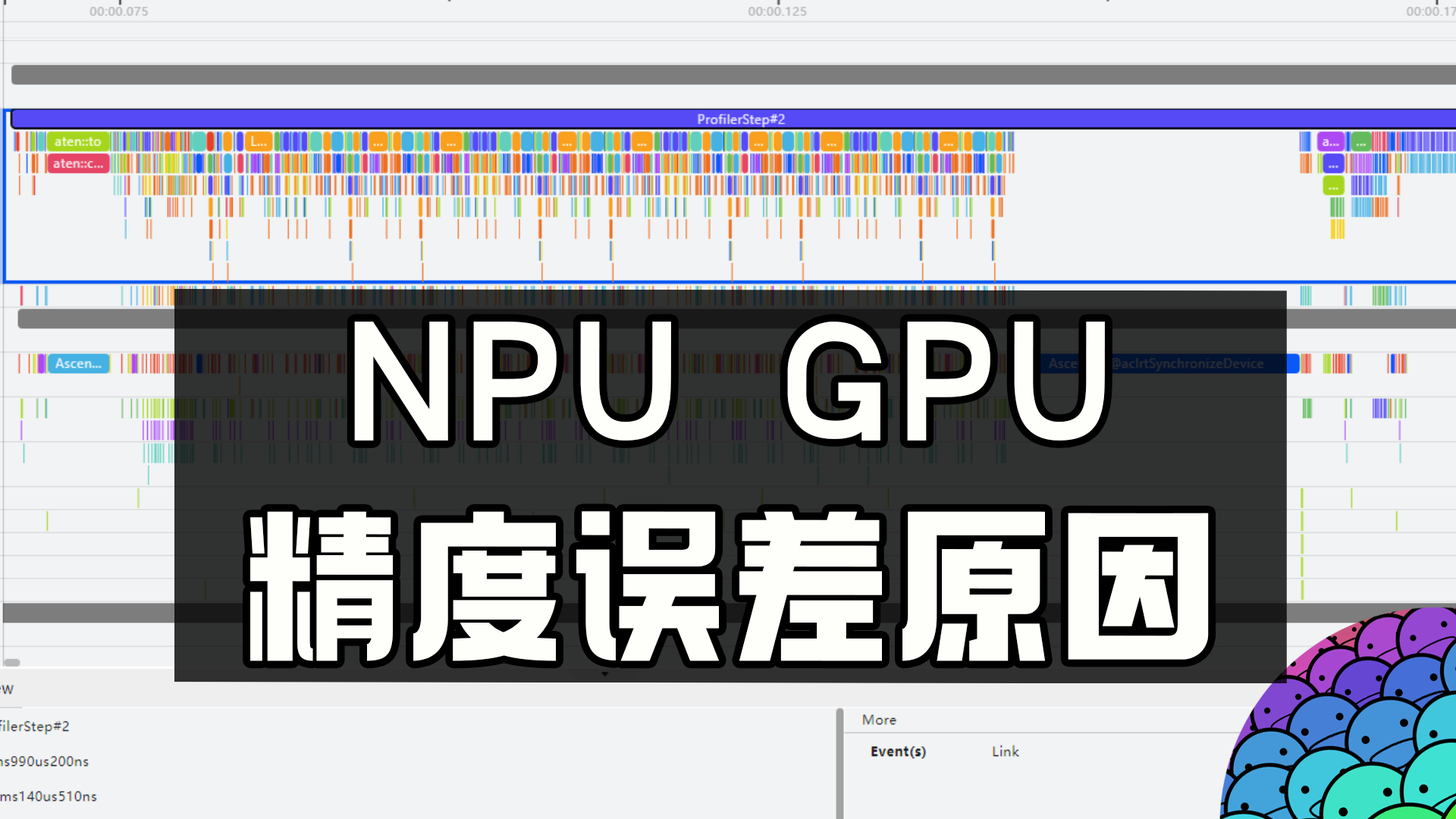
<style>
.page{position:relative;width:1456px;height:819px;background:#f1f3f5}
.page>*{position:absolute;margin:0}
.t1{font:166.8px/204.7px "082-SSJianHeiCuTi";letter-spacing:0.05em;color:#fefffa}
.t2{font:166.8px/204.7px "098-";letter-spacing:0.05em;color:#fefffa}
</style>
<div class="page">
<p class="t1" style="left:250px;top:322px;width:959px;height:339px;text-align:center">NPU GPU<span class="t2"><br>精度误差原因</span></p>
</div>
